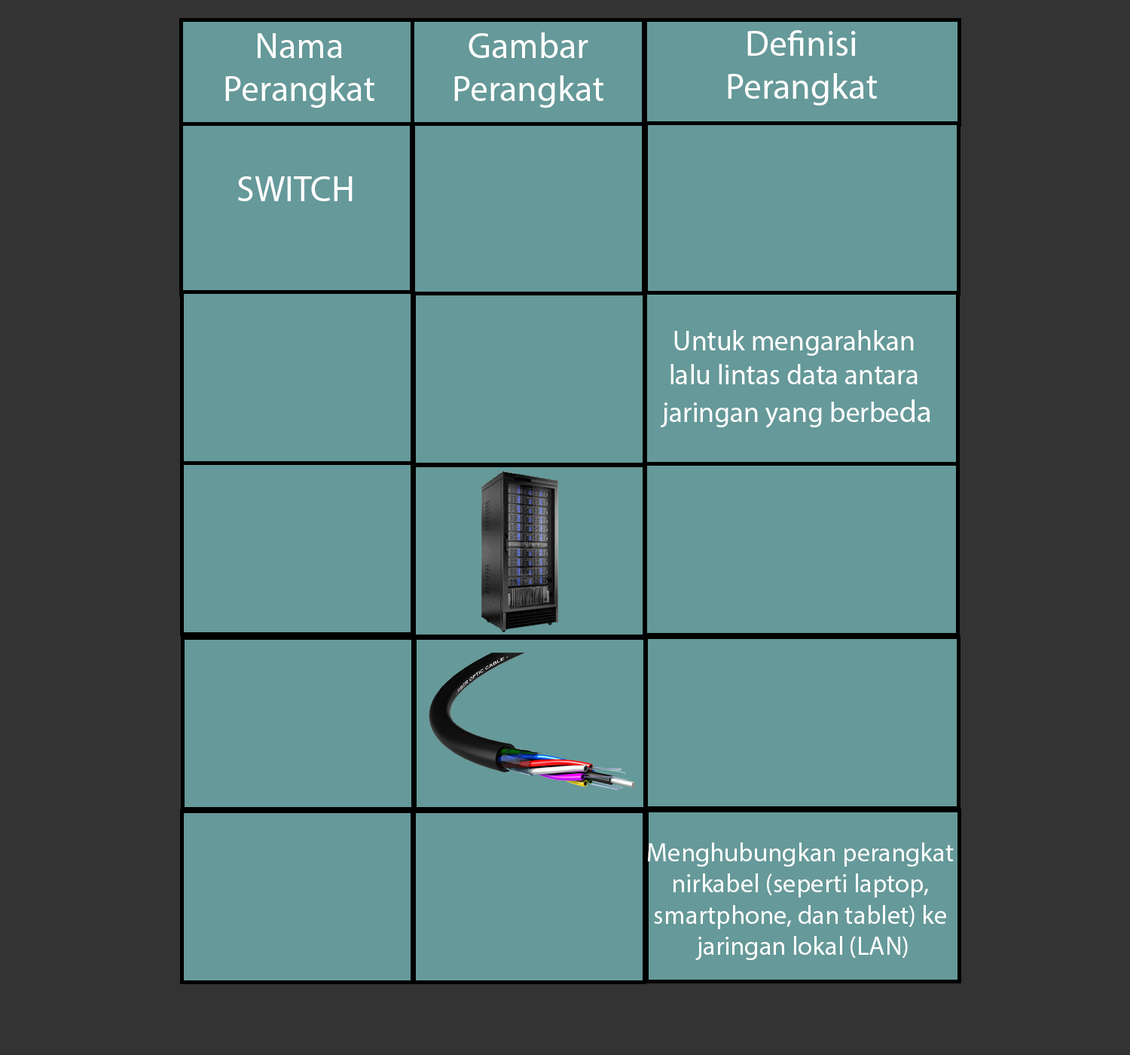
<style>
.page{position:relative;width:1130px;height:1055px;background:#669999}
.page>*{position:absolute;margin:0}
.t1{font:36px "MyriadPro-Regular";color:#ffffff}
.t2{font:28.3px "MyriadPro-Regular";color:#ffffff}
.t3{font:31.1px "MyriadPro-Regular";color:#ffffff}
.t4{font:26.1px "MyriadPro-Regular";color:#ffffff}
</style>
<div class="page">
<p class="t1" style="left:225px;top:33px;width:150px;height:75px;text-align:center">Nama<br>Perangkat</p>
<p class="t1" style="left:454px;top:32px;width:150px;height:76px;text-align:center">Gambar<br>Perangkat</p>
<p class="t1" style="left:728px;top:30px;width:149px;height:75px;text-align:center">Definisi<br>Perangkat</p>
<p class="t1" style="left:238px;top:176px;width:115px;height:25px">SWITCH</p>
<p class="t2" style="left:661px;top:330px;width:270px;height:98px;text-align:center">Untuk mengarahkan <br>lalu lintas data antara <br>jaringan yang berbe<span class="t3">da</span></p>
<p class="t4" style="left:648px;top:842px;width:306px;height:118px;text-align:center">Menghubungkan perangkat <br>nirkabel (seperti laptop, <br>smartphone, dan tablet) ke <br>jaringan lokal (LAN)</p>
</div>
